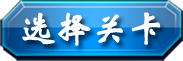
<style>
.page{position:relative;width:183px;height:61px}
.page>*{position:absolute;margin:0}
.t1{font:36px "STXinwei";letter-spacing:-0.02em;color:#ffffff;font-weight:bold}
</style>
<div class="page">
<p class="t1" style="left:22px;top:12px;width:139px;height:34px">选择关卡</p>
</div>
